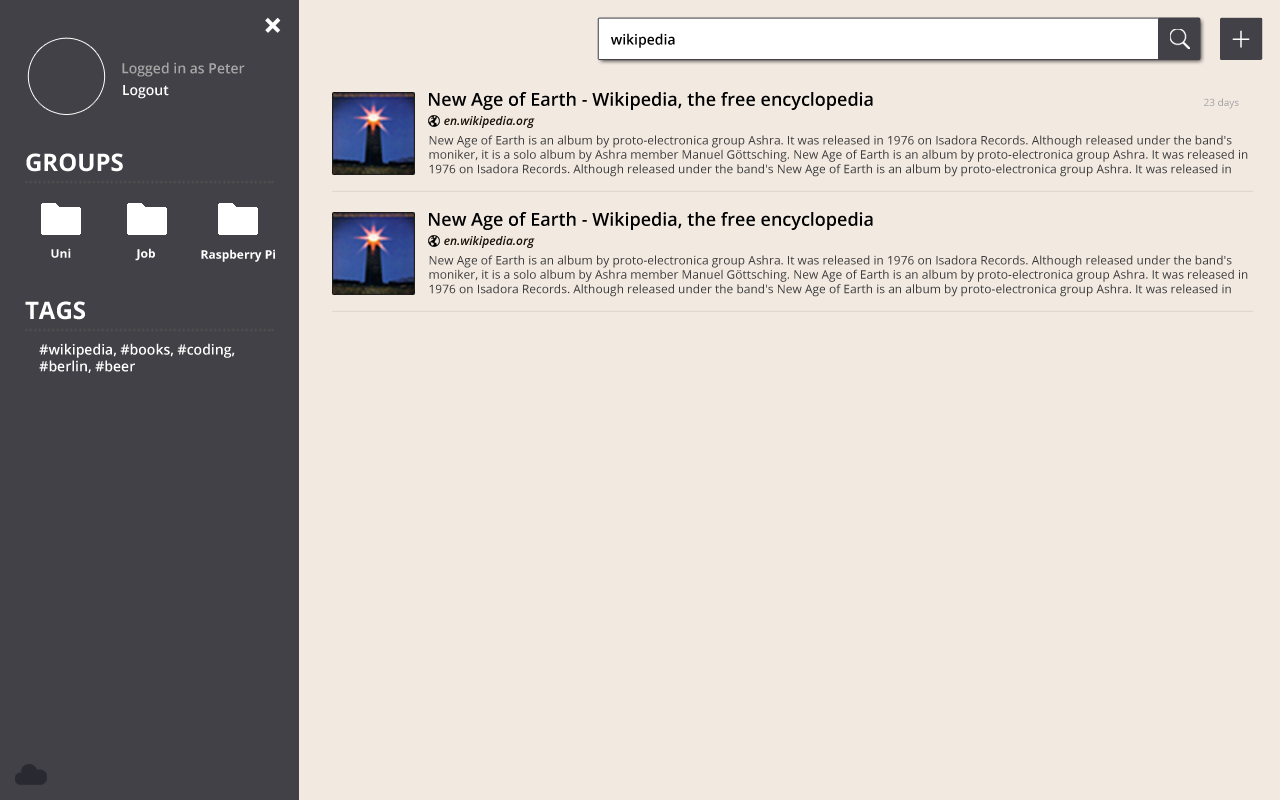
<style>
.page{position:relative;width:1280px;height:800px;background:#f2e9e1}
.page>*{position:absolute;margin:0}
.t1{font:36px "OpenSans-Bold";color:#ffffff}
.t2{font:36px "OpenSans-Light";color:#ffffff}
.t3{font:14px "OpenSans-Semibold";color:#000000}
.t4{font:14px "OpenSans-Semibold";color:#a6a6a6}
.t5{font:14px "OpenSans-Semibold";color:#ffffff}
.t6{font:18px "OpenSans-Semibold";color:#000000}
.t7{font:10px "OpenSans";color:#a6a6a6}
.t8{font:12px "OpenSans-SemiboldItalic";color:#1c140d}
.t9{font:12px "OpenSans";color:#3c3c3c}
.t10{font:24px "OpenSans-Bold";color:#ffffff}
.t11{font:12px "OpenSans-Bold";color:#ffffff}
</style>
<div class="page">
<p class="t1" style="left:265px;top:17px;width:16px;height:16px;rotate:45deg">+</p>
<p class="t2" style="left:1232px;top:30px;width:18px;height:18px">+</p>
<p class="t3" style="left:611px;top:33px;width:64px;height:15px">wikipedia</p>
<p class="t4" style="left:122px;top:62px;width:123px;height:15px">Logged in as Peter</p>
<p class="t5" style="left:123px;top:85px;width:46px;height:14px">Logout</p>
<p class="t6" style="left:429px;top:92px;width:444px;height:18px">New Age of Earth - Wikipedia, the free encyclopedia</p>
<p class="t7" style="left:1204px;top:98px;width:35px;height:11px">23 days</p>
<p class="t8" style="left:444px;top:116px;width:91px;height:12px">en.wikipedia.org</p>
<p class="t9" style="left:429px;top:135px;width:819px;height:42px">New Age of Earth is an album by proto-electronica group Ashra. It was released in 1976 on Isadora Records. Although released under the band's <br>moniker, it is a solo album by Ashra member Manuel Göttsching. New Age of Earth is an album by proto-electronica group Ashra. It was released in 1976 on Isadora Records. Although released under the band's New Age of Earth is an album by proto-electronica group Ashra. It was released in 1976 on Isadora Records. Although released under the band's <br>moniker, it is a solo album by Ashra member Manuel Göttsching.<br><br>moniker, it is a solo album by Ashra member Manuel Göttsching.</p>
<p class="t10" style="left:26px;top:153px;width:97px;height:19px">GROUPS</p>
<p class="t6" style="left:429px;top:212px;width:444px;height:18px">New Age of Earth - Wikipedia, the free encyclopedia</p>
<p class="t8" style="left:444px;top:236px;width:91px;height:12px">en.wikipedia.org</p>
<p class="t11" style="left:51px;top:248px;width:20px;height:10px">Uni</p>
<p class="t11" style="left:135px;top:248px;width:20px;height:13px">Job</p>
<p class="t11" style="left:201px;top:249px;width:74px;height:13px">Raspberry Pi</p>
<p class="t9" style="left:429px;top:255px;width:819px;height:42px">New Age of Earth is an album by proto-electronica group Ashra. It was released in 1976 on Isadora Records. Although released under the band's <br>moniker, it is a solo album by Ashra member Manuel Göttsching. New Age of Earth is an album by proto-electronica group Ashra. It was released in 1976 on Isadora Records. Although released under the band's New Age of Earth is an album by proto-electronica group Ashra. It was released in 1976 on Isadora Records. Although released under the band's <br>moniker, it is a solo album by Ashra member Manuel Göttsching.<br><br>moniker, it is a solo album by Ashra member Manuel Göttsching.</p>
<p class="t10" style="left:25px;top:301px;width:60px;height:19px">TAGS</p>
<p class="t5" style="left:39px;top:343px;width:196px;height:30px">#wikipedia, #books, #coding, <br>#berlin, #beer</p>
</div>
